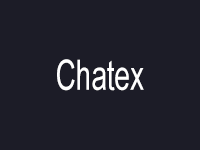
<style>
.page{position:relative;width:200px;height:150px;background:#1c1c27}
.page>*{position:absolute;margin:0}
.t1{font:41.7px "ArialNarrow";color:#ffffff;scale:0.82 1}
</style>
<div class="page">
<p class="t1" style="left:57px;top:59px;width:87px;height:32px">Chatex</p>
</div>
